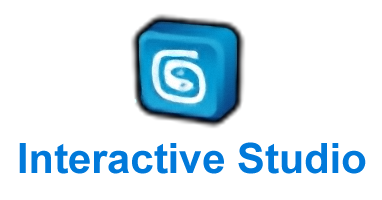
<style>
.page{position:relative;width:382px;height:200px;background:#ffffff}
.page>*{position:absolute;margin:0}
.t1{font:41.7px "Arial-BoldMT";color:#0079da}
</style>
<div class="page">
<p class="t1" style="left:19px;top:142px;width:347px;height:32px">Interactive Studio</p>
</div>
